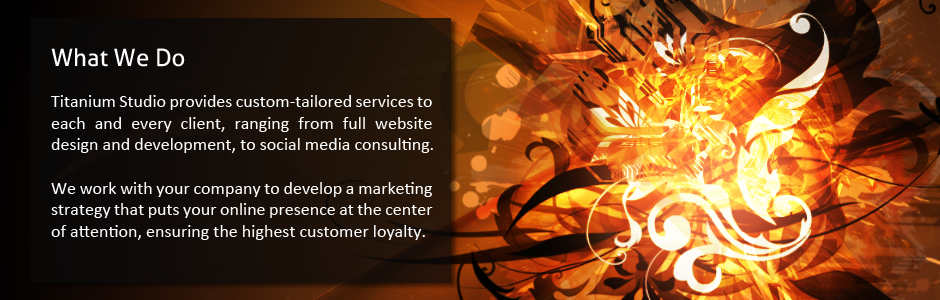
<style>
.page{position:relative;width:940px;height:300px}
.page>*{position:absolute;margin:0}
.t1{font:24px "Aller";color:#ffffff}
.t2{font:18px "Calibri";color:#ffffff}
</style>
<div class="page">
<p class="t1" style="left:51px;top:48px;width:134px;height:19px">What We Do</p>
<p class="t2" style="left:51px;top:95px;width:382px;height:145px;text-align:justify">Titanium Studio provides custom-tailored services to each and every client, ranging from full website design and development, to social media consulting.<br><br>We work with your company to develop a marketing strategy that puts your online presence at the center of attention, ensuring the highest customer loyalty.</p>
</div>
